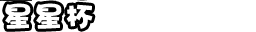
<style>
.page{position:relative;width:256px;height:32px;background:#ffffff}
.page>*{position:absolute;margin:0}
.t1{font:28px "DFPHaiBaoW12";letter-spacing:0.1em;color:#ffffff}
</style>
<div class="page">
<p class="t1" style="left:5px;top:3px;width:88px;height:26px">星星杯</p>
</div>
